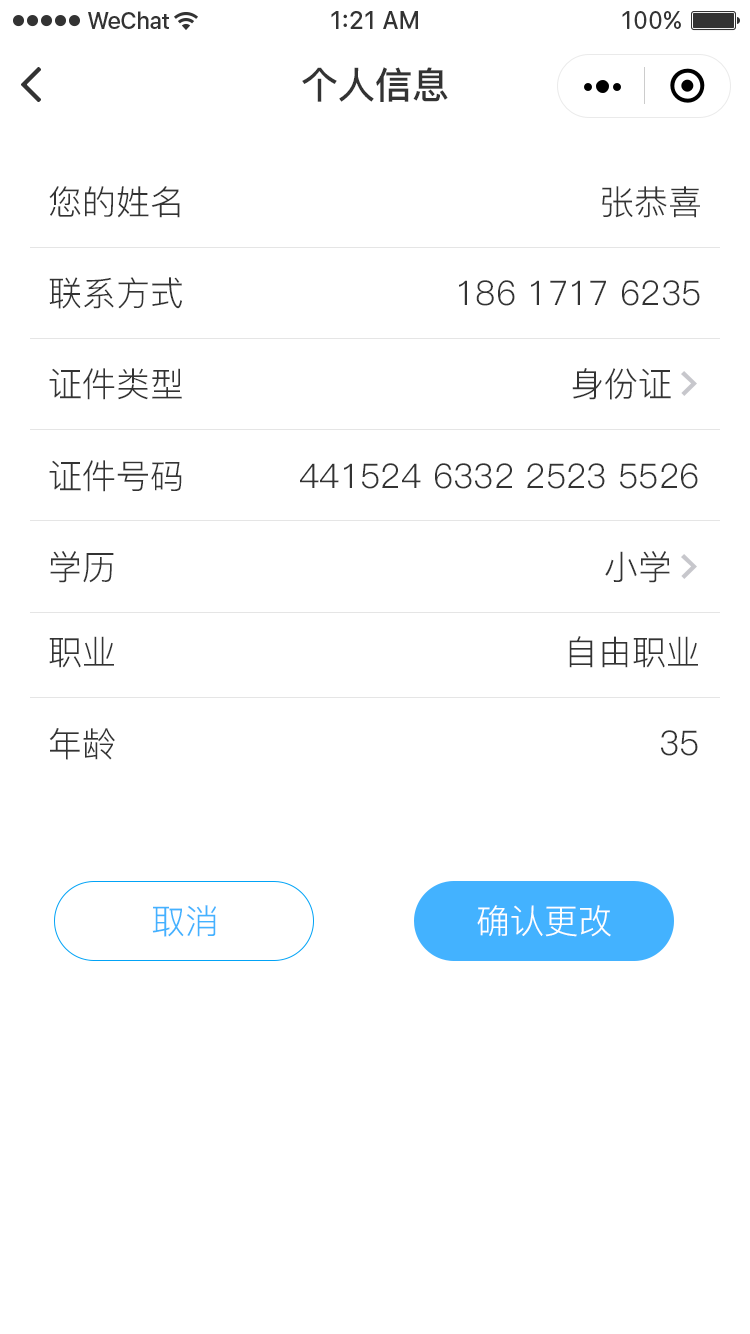
<style>
.page{position:relative;width:750px;height:1334px;background:#ffffff}
.page>*{position:absolute;margin:0}
.t1{font:37px "PingFang-SC-Bold";color:#333333}
.t2{font:34px "PingFang-SC-Regular";color:#333333}
.t3{font:34px "PingFang-SC-Regular";color:#43b2ff}
.t4{font:34px "PingFang-SC-Regular";color:#ffffff}
</style>
<div class="page">
<p class="t1" style="left:302px;top:67px;width:146px;height:35px">个人信息</p>
<p class="t2" style="left:49px;top:186px;width:131px;height:32px">您的姓名</p>
<p class="t2" style="left:602px;top:186px;width:98px;height:32px">张恭喜</p>
<p class="t2" style="left:49px;top:277px;width:133px;height:32px">联系方式</p>
<p class="t2" style="left:459px;top:280px;width:241px;height:26px">186 1717 6235</p>
<p class="t2" style="left:49px;top:368px;width:133px;height:32px">证件类型</p>
<p class="t2" style="left:572px;top:368px;width:99px;height:32px">身份证</p>
<p class="t2" style="left:49px;top:460px;width:133px;height:32px">证件号码</p>
<p class="t2" style="left:300px;top:463px;width:398px;height:26px">441524 6332 2523 5526</p>
<p class="t2" style="left:50px;top:551px;width:64px;height:32px">学历</p>
<p class="t2" style="left:605px;top:551px;width:65px;height:32px">小学</p>
<p class="t2" style="left:49px;top:636px;width:65px;height:32px">职业</p>
<p class="t2" style="left:569px;top:636px;width:129px;height:32px">自由职业</p>
<p class="t2" style="left:49px;top:728px;width:66px;height:32px">年龄</p>
<p class="t2" style="left:661px;top:730px;width:37px;height:26px">35</p>
<p class="t3" style="left:152px;top:905px;width:64px;height:32px">取消</p>
<p class="t4" style="left:477px;top:905px;width:134px;height:32px">确认更改</p>
</div>
